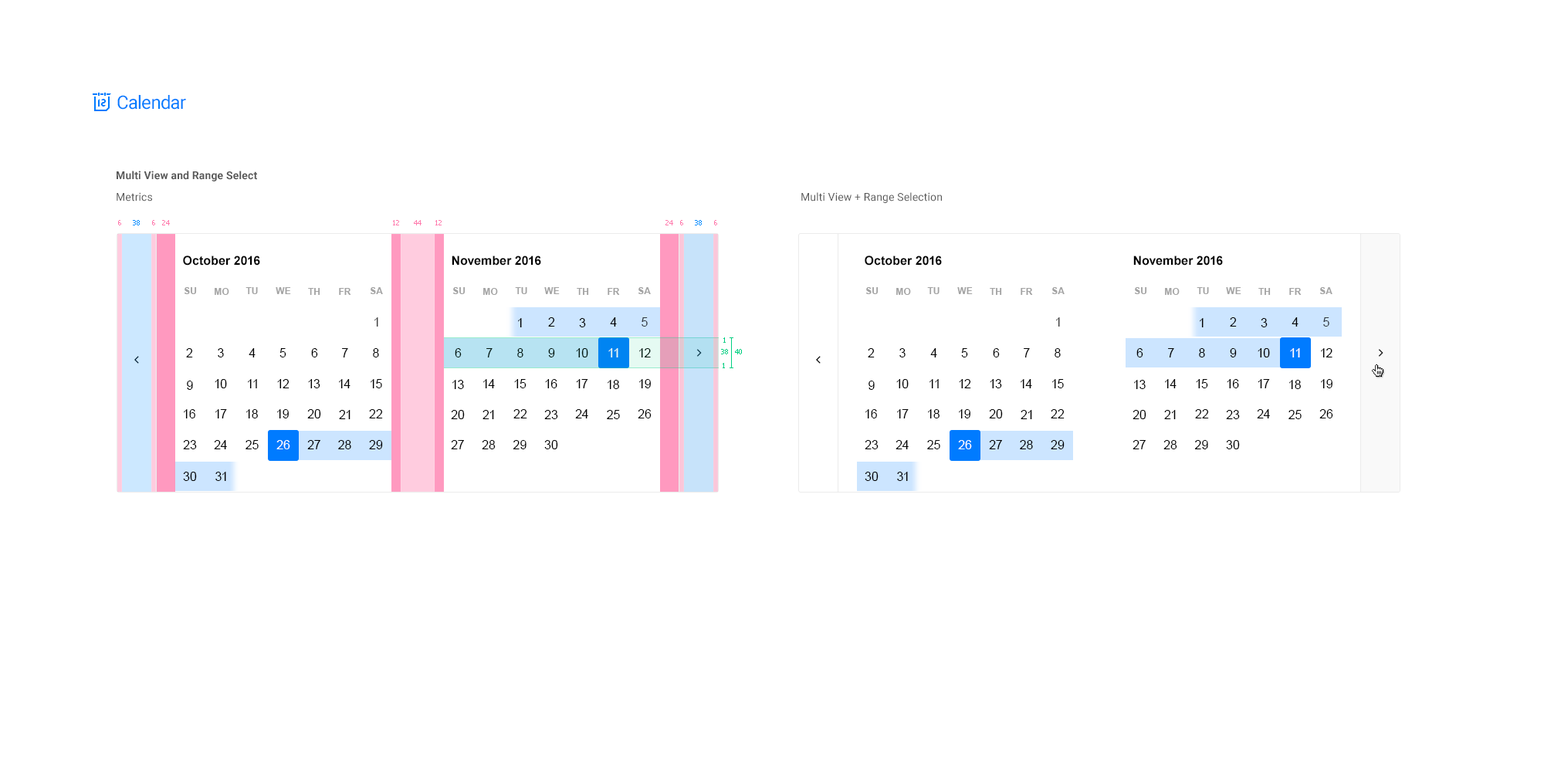
<style>
.page{position:relative;width:1544px;height:772px;background:#ffffff}
.page>*{position:absolute;margin:0}
.t1{font:18.5px "Roboto-Regular";letter-spacing:-0.025em;color:#007bff}
.t2{font:10.8px "Roboto-Bold";letter-spacing:0.01em;color:#585858}
.t3{font:10.8px "Roboto-Regular";letter-spacing:0.01em;color:#585858}
.t4{font:6.9px "Tahoma";color:#ff7cae}
.t5{font:6.9px "Tahoma";color:#008aff}
.t6{font:12.4px "Arial-BoldMT";color:#000000}
.t7{font:9.3px "Arial-BoldMT";letter-spacing:0.01em;color:#a3a3a3}
.t8{font:12.4px "ArialMT";color:#404040}
.t9{font:12.4px "ArialMT";color:#000000}
.t10{font:12.4px "ArialMT";color:#313940}
.t11{font:6.9px "Tahoma";color:#01cf82}
.t12{font:12.4px "ArialMT";color:#e5faf2}
.t13{font:12.4px "ArialMT";color:#ffffff}
</style>
<div class="page">
<p class="t1" style="left:117px;top:95px;width:69px;height:15px">Calendar</p>
<p class="t2" style="left:117px;top:171px;width:140px;height:10px">Multi View and Range Select</p>
<p class="t3" style="left:117px;top:192px;width:35px;height:10px"><span class="t2"><br></span>Metrics</p>
<p class="t3" style="left:801px;top:192px;width:141px;height:11px"><span class="t2"><br></span>Multi View + Range Selection</p>
<p class="t4" style="left:118px;top:220px;width:3px;height:5px">6</p>
<p class="t5" style="left:133px;top:220px;width:7px;height:5px">38</p>
<p class="t4" style="left:152px;top:220px;width:3px;height:5px">6</p>
<p class="t4" style="left:162px;top:220px;width:8px;height:5px">24</p>
<p class="t4" style="left:393px;top:220px;width:6px;height:5px">12</p>
<p class="t4" style="left:414px;top:220px;width:8px;height:5px">44</p>
<p class="t4" style="left:435px;top:220px;width:7px;height:5px">12</p>
<p class="t4" style="left:666px;top:220px;width:7px;height:5px">24</p>
<p class="t4" style="left:680px;top:220px;width:3px;height:5px">6</p>
<p class="t5" style="left:695px;top:220px;width:7px;height:5px">38</p>
<p class="t4" style="left:714px;top:220px;width:3px;height:5px">6</p>
<p class="t6" style="left:183px;top:256px;width:77px;height:10px">October 2016</p>
<p class="t6" style="left:452px;top:256px;width:89px;height:10px">November 2016</p>
<p class="t6" style="left:865px;top:256px;width:77px;height:10px">October 2016</p>
<p class="t6" style="left:1134px;top:256px;width:89px;height:10px">November 2016</p>
<p class="t7" style="left:184px;top:287px;width:13px;height:7px">SU</p>
<p class="t7" style="left:215px;top:288px;width:14px;height:7px">MO</p>
<p class="t7" style="left:246px;top:287px;width:12px;height:7px">TU</p>
<p class="t7" style="left:276px;top:287px;width:15px;height:7px">WE</p>
<p class="t7" style="left:308px;top:288px;width:12px;height:7px">TH</p>
<p class="t7" style="left:339px;top:288px;width:12px;height:7px">FR</p>
<p class="t7" style="left:370px;top:287px;width:13px;height:7px">SA</p>
<p class="t7" style="left:452px;top:287px;width:14px;height:7px">SU</p>
<p class="t7" style="left:483px;top:288px;width:15px;height:7px">MO</p>
<p class="t7" style="left:515px;top:287px;width:12px;height:7px">TU</p>
<p class="t7" style="left:544px;top:287px;width:16px;height:7px">WE</p>
<p class="t7" style="left:577px;top:288px;width:12px;height:7px">TH</p>
<p class="t7" style="left:608px;top:288px;width:12px;height:7px">FR</p>
<p class="t7" style="left:638px;top:287px;width:13px;height:7px">SA</p>
<p class="t7" style="left:866px;top:287px;width:13px;height:7px">SU</p>
<p class="t7" style="left:896px;top:288px;width:15px;height:7px">MO</p>
<p class="t7" style="left:927px;top:287px;width:13px;height:7px">TU</p>
<p class="t7" style="left:957px;top:287px;width:16px;height:7px">WE</p>
<p class="t7" style="left:990px;top:288px;width:12px;height:7px">TH</p>
<p class="t7" style="left:1021px;top:288px;width:12px;height:7px">FR</p>
<p class="t7" style="left:1052px;top:287px;width:13px;height:7px">SA</p>
<p class="t7" style="left:1134px;top:287px;width:13px;height:7px">SU</p>
<p class="t7" style="left:1165px;top:288px;width:15px;height:7px">MO</p>
<p class="t7" style="left:1197px;top:287px;width:12px;height:7px">TU</p>
<p class="t7" style="left:1226px;top:287px;width:16px;height:7px">WE</p>
<p class="t7" style="left:1259px;top:288px;width:12px;height:7px">TH</p>
<p class="t7" style="left:1289px;top:288px;width:13px;height:7px">FR</p>
<p class="t7" style="left:1320px;top:287px;width:13px;height:7px">SA</p>
<p class="t8" style="left:374px;top:317px;width:4px;height:10px">1</p>
<p class="t9" style="left:548px;top:317px;width:7px;height:10px">2</p>
<p class="t9" style="left:610px;top:317px;width:7px;height:10px">4</p>
<p class="t10" style="left:642px;top:317px;width:6px;height:10px">5</p>
<p class="t8" style="left:1056px;top:317px;width:4px;height:10px">1</p>
<p class="t9" style="left:1230px;top:317px;width:7px;height:10px">2</p>
<p class="t9" style="left:1292px;top:317px;width:7px;height:10px">4</p>
<p class="t10" style="left:1323px;top:317px;width:7px;height:10px">5</p>
<p class="t9" style="left:518px;top:318px;width:4px;height:9px">1</p>
<p class="t9" style="left:579px;top:318px;width:7px;height:9px">3</p>
<p class="t9" style="left:1200px;top:318px;width:4px;height:9px">1</p>
<p class="t9" style="left:1261px;top:318px;width:7px;height:9px">3</p>
<p class="t11" style="left:724px;top:337px;width:2px;height:6px">1</p>
<p class="t9" style="left:186px;top:348px;width:7px;height:10px">2</p>
<p class="t9" style="left:218px;top:348px;width:6px;height:10px">3</p>
<p class="t9" style="left:249px;top:348px;width:7px;height:10px">4</p>
<p class="t9" style="left:280px;top:348px;width:6px;height:10px">5</p>
<p class="t9" style="left:311px;top:348px;width:7px;height:10px">6</p>
<p class="t9" style="left:342px;top:348px;width:6px;height:10px">7</p>
<p class="t9" style="left:373px;top:348px;width:6px;height:10px">8</p>
<p class="t9" style="left:455px;top:348px;width:7px;height:10px">6</p>
<p class="t9" style="left:486px;top:348px;width:7px;height:10px">7</p>
<p class="t9" style="left:517px;top:348px;width:7px;height:10px">8</p>
<p class="t9" style="left:548px;top:348px;width:7px;height:10px">9</p>
<p class="t9" style="left:576px;top:348px;width:12px;height:10px">10</p>
<p class="t12" style="left:608px;top:348px;width:10px;height:10px">11</p>
<p class="t9" style="left:639px;top:348px;width:12px;height:10px">12</p>
<p class="t11" style="left:721px;top:349px;width:7px;height:5px">38</p>
<p class="t11" style="left:735px;top:349px;width:7px;height:5px">40</p>
<p class="t9" style="left:868px;top:348px;width:7px;height:10px">2</p>
<p class="t9" style="left:900px;top:348px;width:6px;height:10px">3</p>
<p class="t9" style="left:930px;top:348px;width:7px;height:10px">4</p>
<p class="t9" style="left:961px;top:348px;width:7px;height:10px">5</p>
<p class="t9" style="left:993px;top:348px;width:7px;height:10px">6</p>
<p class="t9" style="left:1024px;top:348px;width:6px;height:10px">7</p>
<p class="t9" style="left:1055px;top:348px;width:6px;height:10px">8</p>
<p class="t9" style="left:1137px;top:348px;width:7px;height:10px">6</p>
<p class="t9" style="left:1168px;top:348px;width:6px;height:10px">7</p>
<p class="t9" style="left:1199px;top:348px;width:6px;height:10px">8</p>
<p class="t9" style="left:1230px;top:348px;width:7px;height:10px">9</p>
<p class="t9" style="left:1258px;top:348px;width:12px;height:10px">10</p>
<p class="t13" style="left:1290px;top:348px;width:10px;height:10px">11</p>
<p class="t9" style="left:1321px;top:348px;width:12px;height:10px">12</p>
<p class="t11" style="left:723px;top:363px;width:2px;height:5px">1</p>
<p class="t9" style="left:187px;top:381px;width:6px;height:9px">9</p>
<p class="t9" style="left:215px;top:379px;width:12px;height:9px">10</p>
<p class="t9" style="left:248px;top:379px;width:9px;height:9px">11</p>
<p class="t9" style="left:277px;top:379px;width:13px;height:9px">12</p>
<p class="t9" style="left:308px;top:379px;width:12px;height:9px">13</p>
<p class="t9" style="left:339px;top:379px;width:12px;height:9px">14</p>
<p class="t9" style="left:371px;top:379px;width:11px;height:9px">15</p>
<p class="t9" style="left:452px;top:380px;width:12px;height:9px">13</p>
<p class="t9" style="left:483px;top:379px;width:12px;height:9px">14</p>
<p class="t9" style="left:514px;top:379px;width:13px;height:9px">15</p>
<p class="t9" style="left:545px;top:379px;width:12px;height:9px">16</p>
<p class="t9" style="left:576px;top:379px;width:12px;height:9px">17</p>
<p class="t9" style="left:608px;top:380px;width:11px;height:9px">18</p>
<p class="t9" style="left:639px;top:379px;width:12px;height:9px">19</p>
<p class="t9" style="left:869px;top:381px;width:6px;height:9px">9</p>
<p class="t9" style="left:896px;top:379px;width:13px;height:9px">10</p>
<p class="t9" style="left:930px;top:379px;width:9px;height:9px">11</p>
<p class="t9" style="left:959px;top:379px;width:12px;height:9px">12</p>
<p class="t9" style="left:990px;top:379px;width:12px;height:9px">13</p>
<p class="t9" style="left:1021px;top:379px;width:11px;height:9px">14</p>
<p class="t9" style="left:1052px;top:379px;width:12px;height:9px">15</p>
<p class="t9" style="left:1134px;top:380px;width:12px;height:9px">13</p>
<p class="t9" style="left:1165px;top:379px;width:12px;height:9px">14</p>
<p class="t9" style="left:1196px;top:379px;width:12px;height:9px">15</p>
<p class="t9" style="left:1227px;top:379px;width:12px;height:9px">16</p>
<p class="t9" style="left:1258px;top:379px;width:12px;height:9px">17</p>
<p class="t9" style="left:1289px;top:380px;width:12px;height:9px">18</p>
<p class="t9" style="left:1321px;top:379px;width:12px;height:9px">19</p>
<p class="t9" style="left:184px;top:409px;width:11px;height:10px">16</p>
<p class="t9" style="left:215px;top:409px;width:12px;height:10px">17</p>
<p class="t9" style="left:246px;top:409px;width:12px;height:10px">18</p>
<p class="t9" style="left:277px;top:409px;width:12px;height:10px">19</p>
<p class="t9" style="left:307px;top:409px;width:14px;height:10px">20</p>
<p class="t9" style="left:339px;top:410px;width:12px;height:9px">21</p>
<p class="t9" style="left:369px;top:409px;width:14px;height:10px">22</p>
<p class="t9" style="left:451px;top:410px;width:14px;height:9px">20</p>
<p class="t9" style="left:483px;top:410px;width:11px;height:9px">21</p>
<p class="t9" style="left:513px;top:409px;width:14px;height:10px">22</p>
<p class="t9" style="left:544px;top:410px;width:14px;height:9px">23</p>
<p class="t9" style="left:575px;top:409px;width:13px;height:10px">24</p>
<p class="t9" style="left:607px;top:410px;width:13px;height:9px">25</p>
<p class="t9" style="left:638px;top:409px;width:14px;height:10px">26</p>
<p class="t9" style="left:866px;top:409px;width:11px;height:10px">16</p>
<p class="t9" style="left:897px;top:409px;width:12px;height:10px">17</p>
<p class="t9" style="left:928px;top:409px;width:12px;height:10px">18</p>
<p class="t9" style="left:959px;top:409px;width:12px;height:10px">19</p>
<p class="t9" style="left:989px;top:409px;width:14px;height:10px">20</p>
<p class="t9" style="left:1021px;top:410px;width:11px;height:9px">21</p>
<p class="t9" style="left:1051px;top:409px;width:14px;height:10px">22</p>
<p class="t9" style="left:1133px;top:410px;width:14px;height:9px">20</p>
<p class="t9" style="left:1164px;top:410px;width:12px;height:9px">21</p>
<p class="t9" style="left:1195px;top:409px;width:14px;height:10px">22</p>
<p class="t9" style="left:1226px;top:410px;width:14px;height:9px">23</p>
<p class="t9" style="left:1257px;top:409px;width:13px;height:10px">24</p>
<p class="t9" style="left:1289px;top:410px;width:13px;height:9px">25</p>
<p class="t9" style="left:1320px;top:409px;width:14px;height:10px">26</p>
<p class="t9" style="left:183px;top:440px;width:14px;height:9px">23</p>
<p class="t9" style="left:214px;top:440px;width:13px;height:9px">24</p>
<p class="t9" style="left:246px;top:440px;width:13px;height:9px">25</p>
<p class="t13" style="left:276px;top:440px;width:14px;height:9px">26</p>
<p class="t9" style="left:307px;top:440px;width:13px;height:9px">27</p>
<p class="t9" style="left:338px;top:440px;width:13px;height:9px">28</p>
<p class="t9" style="left:369px;top:440px;width:14px;height:9px">29</p>
<p class="t9" style="left:451px;top:440px;width:13px;height:9px">27</p>
<p class="t9" style="left:482px;top:440px;width:14px;height:9px">28</p>
<p class="t9" style="left:513px;top:440px;width:14px;height:9px">29</p>
<p class="t9" style="left:544px;top:440px;width:14px;height:9px">30</p>
<p class="t9" style="left:865px;top:440px;width:14px;height:9px">23</p>
<p class="t9" style="left:896px;top:440px;width:13px;height:9px">24</p>
<p class="t9" style="left:927px;top:440px;width:13px;height:9px">25</p>
<p class="t13" style="left:958px;top:440px;width:14px;height:9px">26</p>
<p class="t9" style="left:989px;top:440px;width:13px;height:9px">27</p>
<p class="t9" style="left:1020px;top:440px;width:13px;height:9px">28</p>
<p class="t9" style="left:1051px;top:440px;width:14px;height:9px">29</p>
<p class="t9" style="left:1133px;top:440px;width:13px;height:9px">27</p>
<p class="t9" style="left:1164px;top:440px;width:14px;height:9px">28</p>
<p class="t9" style="left:1195px;top:440px;width:13px;height:9px">29</p>
<p class="t9" style="left:1226px;top:440px;width:14px;height:9px">30</p>
<p class="t9" style="left:183px;top:472px;width:14px;height:9px">30</p>
<p class="t9" style="left:215px;top:472px;width:11px;height:9px">31</p>
<p class="t9" style="left:865px;top:472px;width:14px;height:9px">30</p>
<p class="t9" style="left:897px;top:472px;width:11px;height:9px">31</p>
</div>
